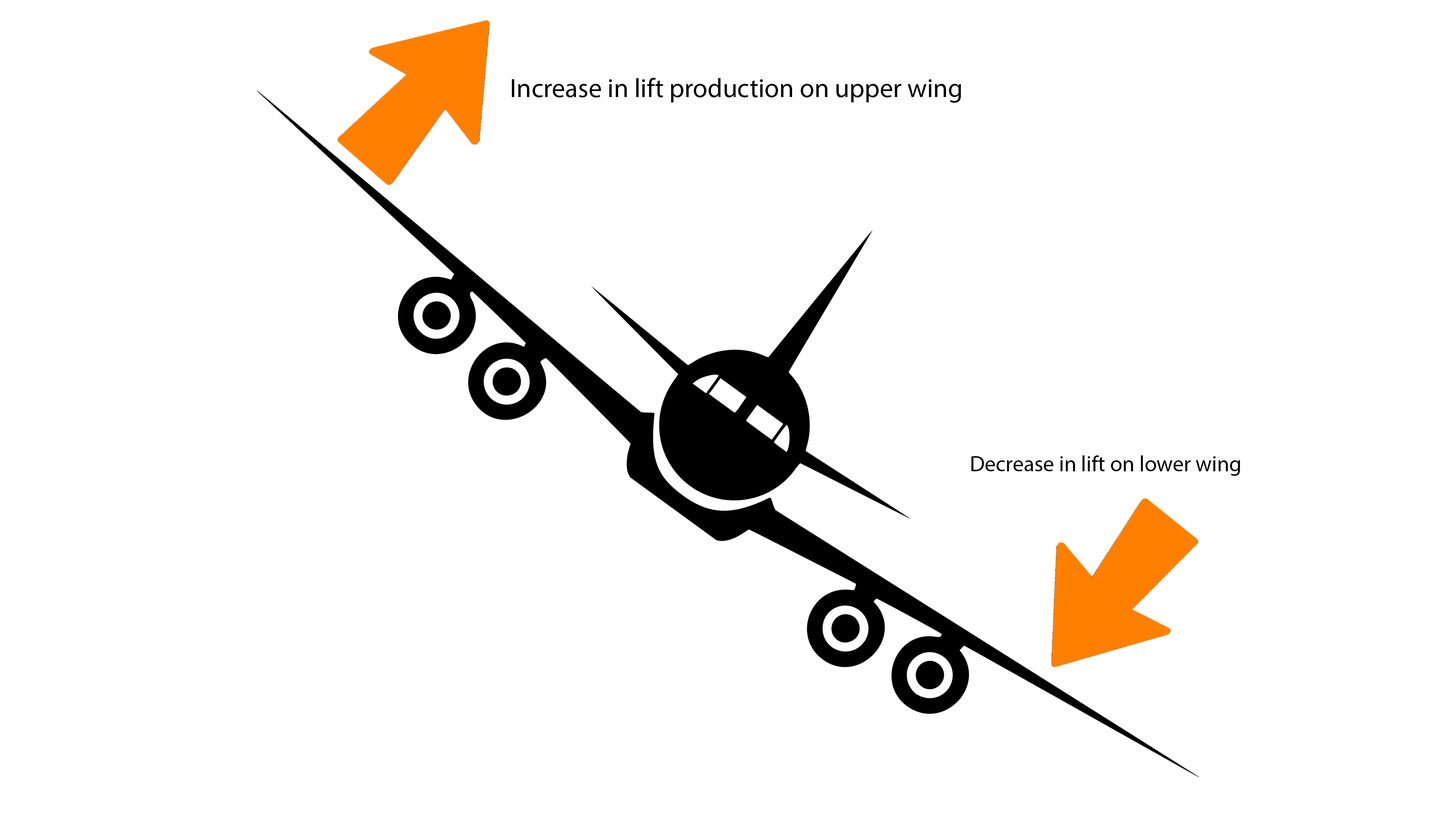
<style>
.page{position:relative;width:1456px;height:819px;background:#ffffff}
.page>*{position:absolute;margin:0}
.t1{font:26.6px "MyriadPro-Regular";color:#000000}
.t2{font:22.1px "MyriadPro-Regular";color:#000000}
</style>
<div class="page">
<p class="t1" style="left:512px;top:78px;width:449px;height:25px">Increase in lift production on upper wing</p>
<p class="t2" style="left:971px;top:455px;width:269px;height:21px">Decrease in lift on lower wing</p>
</div>
